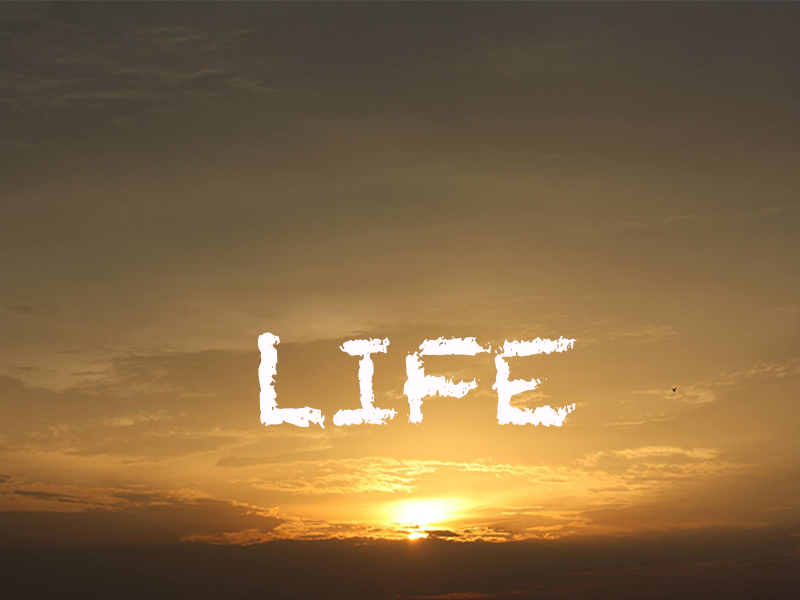
<style>
.page{position:relative;width:800px;height:600px}
.page>*{position:absolute;margin:0}
.t1{font:120px "Chalkduster";color:#fffbff}
</style>
<div class="page">
<p class="t1" style="left:257px;top:332px;width:320px;height:97px">LIFE</p>
</div>
